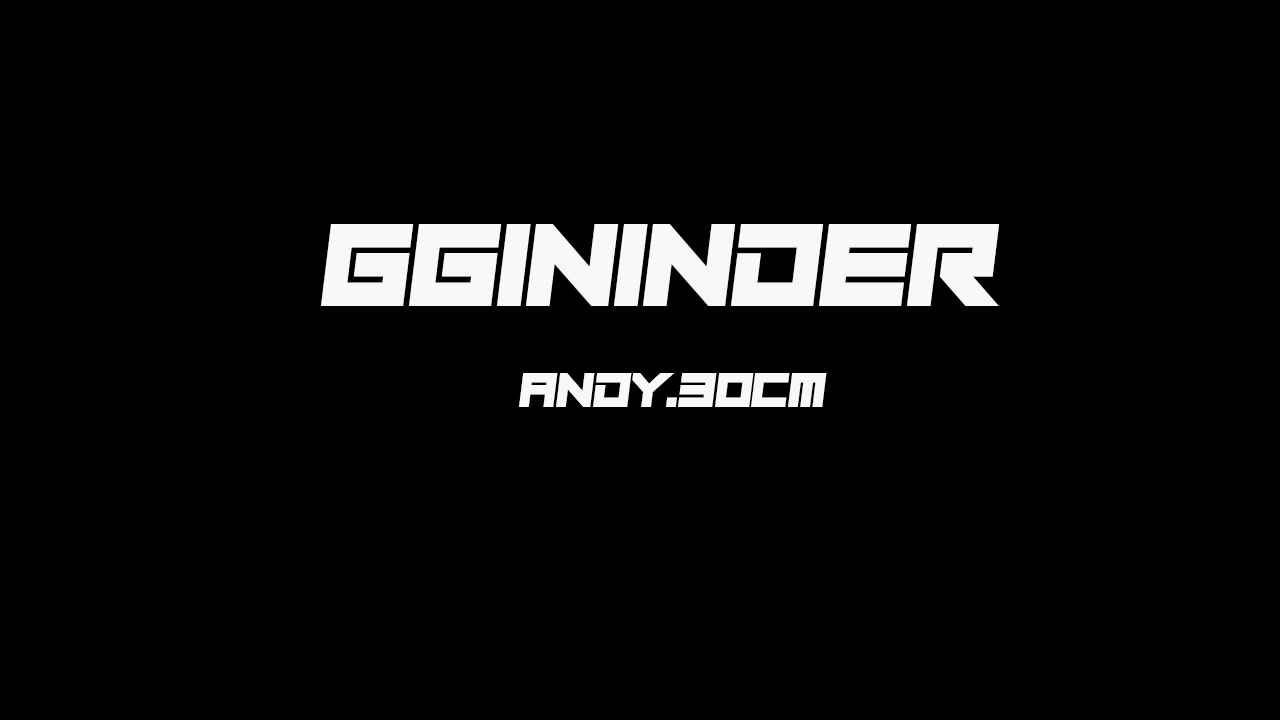
<style>
.page{position:relative;width:1280px;height:720px;background:#000000}
.page>*{position:absolute;margin:0}
.t1{font:120px "PlayPretend";color:#faf7f7}
.t2{font:50px "PlayPretend";color:#faf7f7}
</style>
<div class="page">
<p class="t1" style="left:321px;top:224px;width:679px;height:82px">GGININDER</p>
<p class="t2" style="left:519px;top:373px;width:308px;height:34px">andy.30cm</p>
</div>
